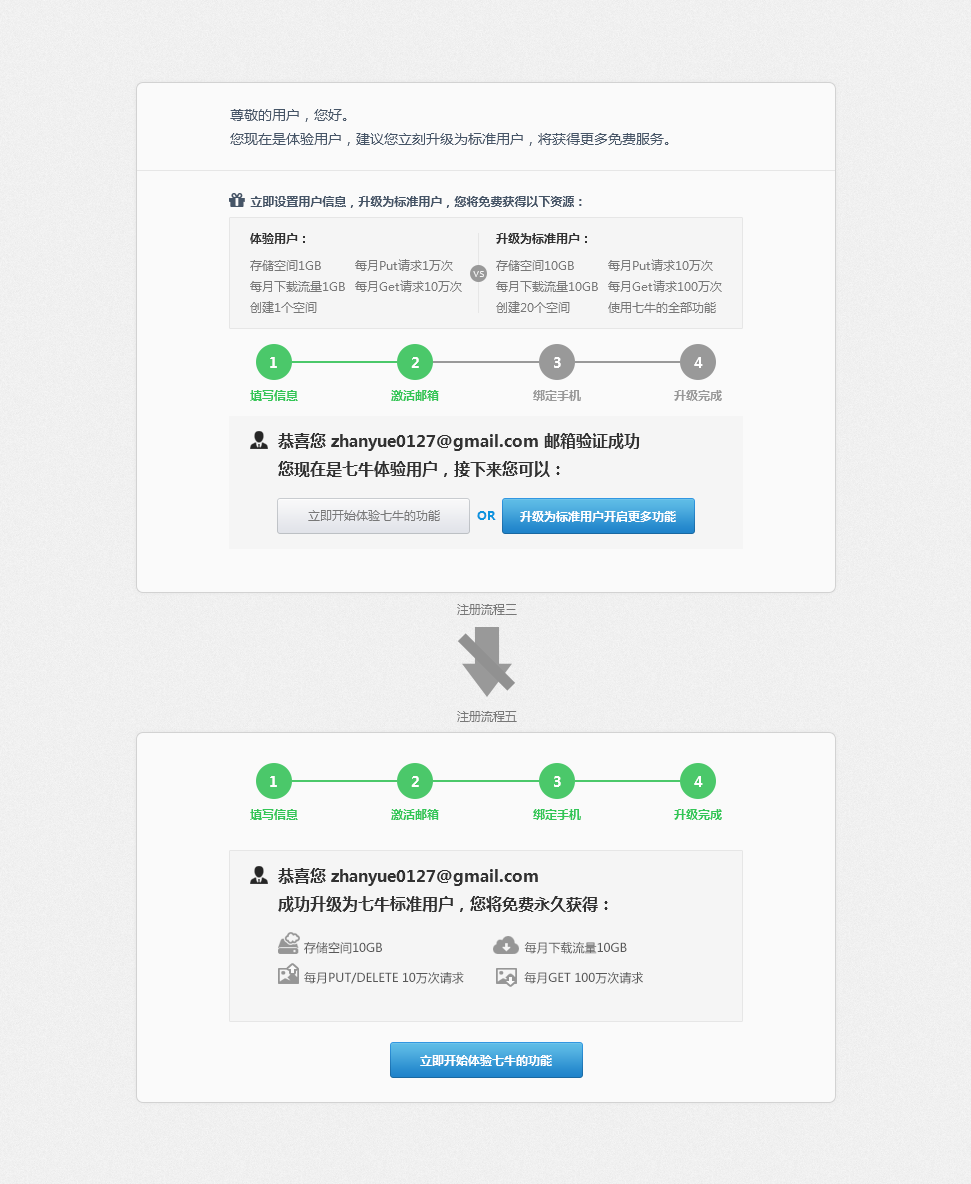
<style>
.page{position:relative;width:971px;height:1184px;background:#fafafa}
.page>*{position:absolute;margin:0}
.t1{font:14px/24px "MicrosoftYaHei";color:#465567}
.t2{font:12px "MicrosoftYaHei-Bold";color:#465567}
.t3{font:12px "MicrosoftYaHei-Bold";color:#323232}
.t4{font:12px "MicrosoftYaHei";color:#787878}
.t5{font:10px "Candara";color:#f7f7f7}
.t6{font:14px "MicrosoftYaHei-Bold";color:#ffffff}
.t7{font:12px "MicrosoftYaHei-Bold";color:#32c656}
.t8{font:12px "MicrosoftYaHei-Bold";color:#999999}
.t9{font:16px "MicrosoftYaHei-Bold";color:#323232}
.t10{font:12px "MicrosoftYaHei-Bold";color:#0c94de}
.t11{font:12px "MicrosoftYaHei-Bold";color:#ffffff}
.t12{font:12px/30px "MicrosoftYaHei";color:#585858}
</style>
<div class="page">
<p class="t1" style="left:230px;top:109px;width:439px;height:37px">尊敬的用户，您好。<br>您现在是体验用户，建议您立刻升级为标准用户，将获得更多免费服务。</p>
<p class="t2" style="left:250px;top:196px;width:332px;height:12px">立即设置用户信息，升级为标准用户，您将免费获得以下资源：</p>
<p class="t3" style="left:250px;top:233px;width:55px;height:11px">体验用户：</p>
<p class="t3" style="left:496px;top:233px;width:91px;height:11px">升级为标准用户：</p>
<p class="t4" style="left:250px;top:260px;width:95px;height:53px">存储空间1GB<br>每月下载流量1GB<br>创建1个空间</p>
<p class="t4" style="left:355px;top:259px;width:107px;height:33px">每月Put请求1万次<br>每月Get请求10万次</p>
<p class="t4" style="left:496px;top:260px;width:102px;height:53px">存储空间10GB<br>每月下载流量10GB<br>创建20个空间</p>
<p class="t4" style="left:608px;top:259px;width:114px;height:54px">每月Put请求10万次<br>每月Get请求100万次<br>使用七牛的全部功能</p>
<p class="t5" style="left:473px;top:271px;width:11px;height:6px">VS</p>
<p class="t6" style="left:270px;top:357px;width:7px;height:11px">1</p>
<p class="t6" style="left:411px;top:357px;width:8px;height:11px">2</p>
<p class="t6" style="left:554px;top:357px;width:7px;height:11px">3</p>
<p class="t6" style="left:694px;top:357px;width:9px;height:11px">4</p>
<p class="t7" style="left:250px;top:390px;width:48px;height:11px">填写信息</p>
<p class="t7" style="left:391px;top:390px;width:48px;height:11px">激活邮箱</p>
<p class="t8" style="left:533px;top:390px;width:48px;height:11px">绑定手机</p>
<p class="t8" style="left:674px;top:390px;width:48px;height:11px">升级完成</p>
<p class="t9" style="left:278px;top:433px;width:362px;height:44px">恭喜您 zhanyue0127@gmail.com 邮箱验证成功<br>您现在是七牛体验用户，接下来您可以：</p>
<p class="t4" style="left:308px;top:510px;width:132px;height:11px">立即开始体验七牛的功能</p>
<p class="t10" style="left:477px;top:511px;width:19px;height:9px">OR</p>
<p class="t11" style="left:520px;top:511px;width:156px;height:11px">升级为标准用户开启更多功能</p>
<p class="t4" style="left:457px;top:604px;width:60px;height:11px">注册流程三</p>
<p class="t4" style="left:457px;top:711px;width:60px;height:11px">注册流程五</p>
<p class="t6" style="left:270px;top:776px;width:7px;height:11px">1</p>
<p class="t6" style="left:411px;top:776px;width:8px;height:11px">2</p>
<p class="t6" style="left:554px;top:776px;width:7px;height:11px">3</p>
<p class="t6" style="left:694px;top:776px;width:9px;height:11px">4</p>
<p class="t7" style="left:250px;top:809px;width:48px;height:11px">填写信息</p>
<p class="t7" style="left:391px;top:809px;width:48px;height:11px">激活邮箱</p>
<p class="t7" style="left:533px;top:809px;width:48px;height:11px">绑定手机</p>
<p class="t7" style="left:674px;top:809px;width:48px;height:11px">升级完成</p>
<p class="t9" style="left:278px;top:868px;width:330px;height:44px">恭喜您 zhanyue0127@gmail.com <br>成功升级为七牛标准用户，您将免费永久获得：</p>
<p class="t12" style="left:304px;top:941px;width:339px;height:43px">存储空间10GB                                        每月下载流量10GB<br>         每月PUT/DELETE 10万次请求                 每月GET 100万次请求</p>
<p class="t11" style="left:420px;top:1055px;width:132px;height:11px">立即开始体验七牛的功能</p>
</div>
